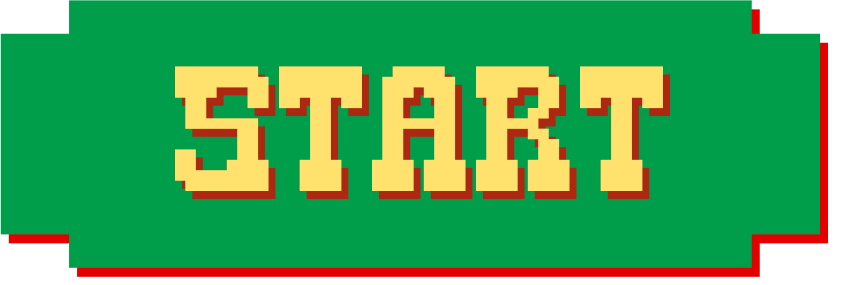
<style>
.page{position:relative;width:845px;height:285px;background:#009e4a}
.page>*{position:absolute;margin:0}
.t1{font:165.8px "Bandit";color:#ffe26d}
</style>
<div class="page">
<p class="t1" style="left:175px;top:66px;width:488px;height:125px">START</p>
</div>
